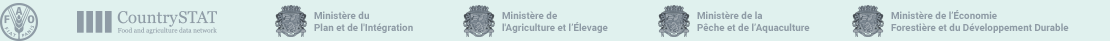
<style>
.page{position:relative;width:1110px;height:41px;background:#e0f1ee}
.page>*{position:absolute;margin:0}
.t1{font:10px "Roboto-Bold";color:#8f9ca6}
</style>
<div class="page">
<p class="t1" style="left:314px;top:11px;width:99px;height:22px">Ministère du  <br>Plan et de l'Intégration</p>
<p class="t1" style="left:502px;top:11px;width:106px;height:22px">Ministère de <br>l'Agriculture et l’Élevage</p>
<p class="t1" style="left:697px;top:11px;width:113px;height:22px">Ministère de la <br>Pêche et de l’Aquaculture</p>
<p class="t1" style="left:891px;top:10px;width:178px;height:23px">Ministère de l’Économie <br>Forestière et du Développement Durable</p>
</div>
